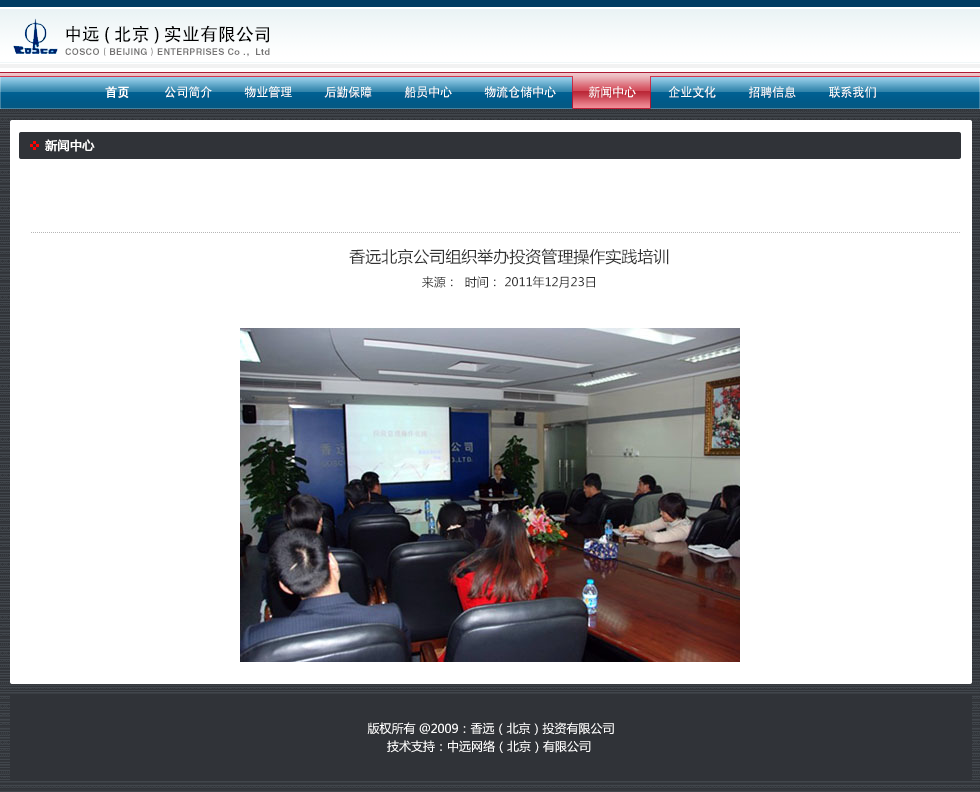
<style>
.page{position:relative;width:980px;height:792px;background:#ffffff}
.page>*{position:absolute;margin:0}
.t1{font:18px "AdobeHeitiStd-Regular";color:#000000}
.t2{font:9px "HelveticaLTStd-Bold";letter-spacing:0.04em;color:#747373}
.t3{font:9px "FZDHTJW--GB1-0";letter-spacing:0.04em;color:#747373}
.t4{font:12px "SIL-Hei-Med-Jian";color:#ffffff}
.t5{font:12px "SIL-Hei-Med-Jian";color:#ffffff;font-weight:bold}
.t6{font:12px "MicrosoftYaHei";color:#ffffff;font-weight:bold}
.t7{font:16px/24px "MicrosoftYaHei";color:#333333}
.t8{font:12px/24px "MicrosoftYaHei";color:#333333}
.t9{font:12px/18px "MicrosoftYaHei";color:#ffffff}
</style>
<div class="page">
<p class="t1" style="left:66px;top:25px;width:203px;height:19px">中远 ( 北京 ) 实业有限公司</p>
<p class="t2" style="left:65px;top:47px;width:205px;height:10px">COSCO<span class="t3">（</span>BEIJING<span class="t3">）</span>ENTERPRISES Co .<span class="t3">，</span>Ltd</p>
<p class="t4" style="left:105px;top:86px;width:771px;height:12px"><span class="t5">首页        </span>公司简介        物业管理        后勤保障        船员中心        物流仓储中心        新闻中心        企业文化        招聘信息        联系我们</p>
<p class="t6" style="left:45px;top:139px;width:50px;height:13px">新闻中心</p>
<p class="t7" style="left:349px;top:248px;width:320px;height:40px;text-align:justify">香远北京公司组织举办投资管理操作实践培训<br><span class="t8">来源：  时间： 2011年12月23日</span></p>
<p class="t9" style="left:367px;top:722px;width:247px;height:31px;text-align:center">版权所有 @2009：香远（北京）投资有限公司<br>技术支持：中远网络（北京）有限公司</p>
</div>
